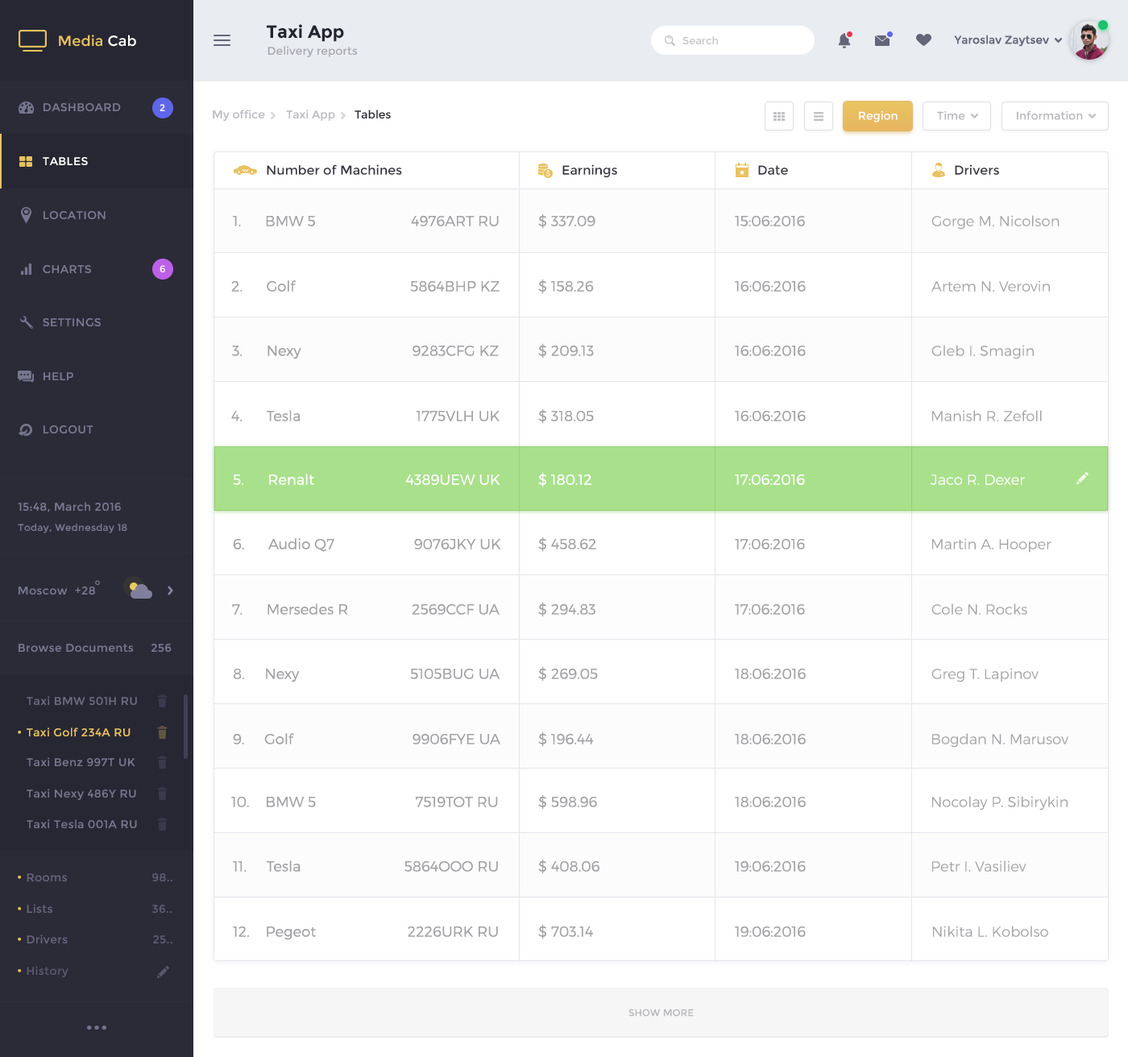
<style>
.page{position:relative;width:1128px;height:1057px;background:#ffffff}
.page>*{position:absolute;margin:0}
.t1{font:17.7px "Montserrat-Bold";letter-spacing:-0.002em;color:#242430}
.t2{font:14.5px "Montserrat-Regular";letter-spacing:0.005em;color:#e8c260}
.t3{font:14.5px "Montserrat-Regular";letter-spacing:0.005em;color:#ffffff}
.t4{font:10.5px "Montserrat-Regular";letter-spacing:-0.002em;color:#c5c5c9}
.t5{font:11.3px "Montserrat-Regular";letter-spacing:-0.002em;color:#656578}
.t6{font:11.3px "Montserrat-Regular";letter-spacing:-0.002em;color:#a7a7b0}
.t7{font:11.3px "Montserrat-Regular";letter-spacing:0.025em;color:#7a7a93}
.t8{font:9.7px "Montserrat-Regular";letter-spacing:0.025em;color:#ffffff}
.t9{font:11.3px "Montserrat-Regular";letter-spacing:-0.002em;color:#babac2}
.t10{font:11.3px "Montserrat-Regular";letter-spacing:-0.002em;color:#242430}
.t11{font:11.3px "Montserrat-Regular";letter-spacing:-0.002em;color:#ffffff}
.t12{font:11.3px "Montserrat-Regular";letter-spacing:-0.002em;color:#b5b5ba}
.t13{font:11.3px "Montserrat-Regular";letter-spacing:0.025em;color:#ffffff}
.t14{font:12.9px "Montserrat-Regular";letter-spacing:-0.002em;color:#363640}
.t15{font:14.5px "Montserrat-Light";color:#a2a2a6}
.t16{font:14.5px "Montserrat-Light";color:#ffffff}
.t17{font:9.7px/20.1px "Montserrat-Regular";letter-spacing:0.025em;color:#7a7a93}
.t18{font:11.3px/20.1px "Montserrat-Regular";letter-spacing:0.025em;color:#7a7a93}
.t19{font:8.1px "Montserrat-Regular";letter-spacing:0.025em;color:#7a7a93}
.t20{font:11.3px "Montserrat-Regular";letter-spacing:0.025em;color:#6b6b81}
.t21{font:11.3px "Montserrat-Regular";letter-spacing:0.025em;color:#e8c260}
.t22{font:14.5px "Montserrat-Black";letter-spacing:0.025em;color:#e8c260}
.t23{font:11.3px "Montserrat-Regular";letter-spacing:0.025em;color:#76768e}
.t24{font:11.3px "Montserrat-Regular";letter-spacing:0.025em;color:#66667b}
.t25{font:11.3px "Montserrat-Regular";letter-spacing:0.025em;color:#5f5f74}
.t26{font:11.3px "Montserrat-Regular";letter-spacing:0.025em;color:#5a5a6e}
.t27{font:9.7px "Montserrat-Regular";letter-spacing:-0.002em;color:#b5b5ba}
</style>
<div class="page">
<p class="t1" style="left:267px;top:24px;width:77px;height:18px">Taxi App</p>
<p class="t2" style="left:59px;top:35px;width:77px;height:12px">Media <span class="t3">Cab</span></p>
<p class="t4" style="left:682px;top:36px;width:36px;height:8px">Search</p>
<p class="t5" style="left:954px;top:35px;width:95px;height:12px">Yaroslav Zaytsev</p>
<p class="t6" style="left:268px;top:46px;width:90px;height:11px">Delivery reports</p>
<p class="t7" style="left:44px;top:103px;width:77px;height:8px">DASHBOARD</p>
<p class="t8" style="left:160px;top:104px;width:5px;height:7px">2</p>
<p class="t9" style="left:213px;top:110px;width:52px;height:12px">My office</p>
<p class="t9" style="left:286px;top:110px;width:49px;height:11px">Taxi App</p>
<p class="t10" style="left:355px;top:110px;width:36px;height:9px">Tables</p>
<p class="t11" style="left:859px;top:110px;width:39px;height:12px">Region</p>
<p class="t11" style="left:859px;top:110px;width:39px;height:12px">Region</p>
<p class="t12" style="left:937px;top:110px;width:28px;height:10px">Time</p>
<p class="t12" style="left:1017px;top:110px;width:66px;height:10px">Information</p>
<p class="t13" style="left:43px;top:157px;width:45px;height:8px">TABLES</p>
<p class="t14" style="left:267px;top:164px;width:135px;height:11px">Number of Machines</p>
<p class="t14" style="left:562px;top:164px;width:55px;height:14px">Earnings</p>
<p class="t14" style="left:758px;top:165px;width:30px;height:10px">Date</p>
<p class="t14" style="left:955px;top:164px;width:44px;height:11px">Drivers</p>
<p class="t7" style="left:44px;top:211px;width:62px;height:8px">LOCATION</p>
<p class="t15" style="left:233px;top:215px;width:266px;height:11px">1.      BMW 5                        4976ART RU</p>
<p class="t15" style="left:538px;top:214px;width:57px;height:15px">$ 337.09</p>
<p class="t15" style="left:735px;top:216px;width:70px;height:10px">15:06:2016</p>
<p class="t15" style="left:931px;top:215px;width:129px;height:15px">Gorge M. Nicolson</p>
<p class="t7" style="left:43px;top:265px;width:48px;height:8px">CHARTS</p>
<p class="t8" style="left:160px;top:265px;width:5px;height:7px">6</p>
<p class="t15" style="left:231px;top:280px;width:269px;height:12px">2.      Golf                             5864BHP KZ</p>
<p class="t15" style="left:538px;top:279px;width:56px;height:15px">$ 158.26</p>
<p class="t15" style="left:735px;top:281px;width:71px;height:11px">16:06:2016</p>
<p class="t15" style="left:931px;top:280px;width:119px;height:12px">Artem N. Verovin</p>
<p class="t7" style="left:43px;top:318px;width:58px;height:8px">SETTINGS</p>
<p class="t15" style="left:232px;top:345px;width:267px;height:14px">3.      Nexy                            9283CFG KZ</p>
<p class="t15" style="left:538px;top:343px;width:56px;height:16px">$ 209.13</p>
<p class="t15" style="left:735px;top:346px;width:71px;height:10px">16:06:2016</p>
<p class="t15" style="left:931px;top:345px;width:103px;height:14px">Gleb I. Smagin</p>
<p class="t7" style="left:44px;top:372px;width:29px;height:8px">HELP</p>
<p class="t15" style="left:231px;top:410px;width:269px;height:11px">4.      Tesla                             1775VLH UK</p>
<p class="t15" style="left:538px;top:409px;width:56px;height:15px">$ 318.05</p>
<p class="t15" style="left:735px;top:411px;width:71px;height:10px">16:06:2016</p>
<p class="t15" style="left:932px;top:410px;width:110px;height:11px">Manish R. Zefoll</p>
<p class="t7" style="left:44px;top:425px;width:49px;height:8px">LOGOUT</p>
<p class="t16" style="left:233px;top:474px;width:267px;height:11px">5.      Renalt                       4389UEW UK</p>
<p class="t16" style="left:538px;top:472px;width:53px;height:15px">$ 180.12</p>
<p class="t16" style="left:735px;top:475px;width:70px;height:10px">17:06:2016</p>
<p class="t16" style="left:931px;top:475px;width:94px;height:10px">Jaco R. Dexer</p>
<p class="t17" style="left:18px;top:502px;width:109px;height:31px"><span class="t18">15:48, March 2016<br></span>Today, Wednesday 18</p>
<p class="t15" style="left:233px;top:538px;width:268px;height:14px">6.      Audio Q7                    9076JKY UK</p>
<p class="t15" style="left:538px;top:537px;width:58px;height:15px">$ 458.62</p>
<p class="t15" style="left:735px;top:539px;width:70px;height:11px">17:06:2016</p>
<p class="t15" style="left:932px;top:538px;width:119px;height:15px">Martin A. Hooper</p>
<p class="t19" style="left:95px;top:580px;width:5px;height:5px">o</p>
<p class="t7" style="left:19px;top:587px;width:49px;height:8px">Moscow</p>
<p class="t7" style="left:75px;top:587px;width:20px;height:8px">+28</p>
<p class="t15" style="left:232px;top:603px;width:268px;height:12px">7.      Mersedes R                2569CCF UA</p>
<p class="t15" style="left:538px;top:602px;width:57px;height:15px">$ 294.83</p>
<p class="t15" style="left:735px;top:604px;width:70px;height:11px">17:06:2016</p>
<p class="t15" style="left:931px;top:603px;width:96px;height:12px">Cole N. Rocks</p>
<p class="t7" style="left:19px;top:644px;width:153px;height:8px">Browse Documents     256</p>
<p class="t15" style="left:233px;top:669px;width:267px;height:13px">8.     Nexy                            5105BUG UA</p>
<p class="t15" style="left:538px;top:666px;width:60px;height:16px">$ 269.05</p>
<p class="t15" style="left:735px;top:669px;width:71px;height:10px">18:06:2016</p>
<p class="t15" style="left:931px;top:668px;width:108px;height:14px">Greg T. Lapinov</p>
<p class="t20" style="left:27px;top:696px;width:110px;height:9px">Taxi BMW 501H RU</p>
<p class="t21" style="left:18px;top:728px;width:113px;height:9px"><span class="t22">· </span>Taxi Golf 234A RU</p>
<p class="t15" style="left:233px;top:733px;width:267px;height:11px">9.     Golf                              9906FYE UA</p>
<p class="t15" style="left:538px;top:732px;width:56px;height:15px">$ 196.44</p>
<p class="t15" style="left:735px;top:734px;width:71px;height:10px">18:06:2016</p>
<p class="t15" style="left:932px;top:733px;width:136px;height:15px">Bogdan N. Marusov</p>
<p class="t23" style="left:27px;top:757px;width:108px;height:9px">Taxi Benz 997T UK</p>
<p class="t23" style="left:27px;top:789px;width:109px;height:11px">Taxi Nexy 486Y RU</p>
<p class="t15" style="left:231px;top:796px;width:267px;height:11px">10.    BMW 5                         7519TOT RU</p>
<p class="t15" style="left:538px;top:794px;width:59px;height:16px">$ 598.96</p>
<p class="t15" style="left:735px;top:797px;width:71px;height:10px">18:06:2016</p>
<p class="t15" style="left:932px;top:796px;width:136px;height:15px">Nocolay P. Sibirykin</p>
<p class="t23" style="left:27px;top:819px;width:110px;height:9px">Taxi Tesla 001A RU</p>
<p class="t15" style="left:233px;top:861px;width:265px;height:11px">11.     Tesla                          5864OOO RU</p>
<p class="t15" style="left:538px;top:859px;width:61px;height:15px">$ 408.06</p>
<p class="t15" style="left:735px;top:861px;width:71px;height:11px">19:06:2016</p>
<p class="t15" style="left:932px;top:861px;width:94px;height:11px">Petr I. Vasiliev</p>
<p class="t24" style="left:18px;top:873px;width:49px;height:8px"><span class="t22">· </span>Rooms</p>
<p class="t25" style="left:152px;top:873px;width:20px;height:8px">98..</p>
<p class="t24" style="left:18px;top:904px;width:34px;height:9px"><span class="t22">· </span>Lists</p>
<p class="t25" style="left:152px;top:905px;width:20px;height:9px">36..</p>
<p class="t15" style="left:233px;top:927px;width:265px;height:13px">12.    Pegeot                       2226URK RU</p>
<p class="t15" style="left:538px;top:924px;width:55px;height:15px">$ 703.14</p>
<p class="t15" style="left:735px;top:926px;width:71px;height:11px">19:06:2016</p>
<p class="t15" style="left:933px;top:926px;width:115px;height:11px">Nikita L. Kobolso</p>
<p class="t24" style="left:18px;top:935px;width:50px;height:9px"><span class="t22">· </span>Drivers</p>
<p class="t25" style="left:153px;top:935px;width:19px;height:9px">25..</p>
<p class="t26" style="left:18px;top:966px;width:50px;height:11px"><span class="t22">· </span>History</p>
<p class="t27" style="left:628px;top:1009px;width:66px;height:8px">SHOW MORE</p>
</div>
